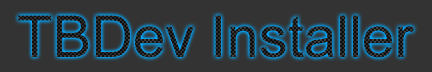
<style>
.page{position:relative;width:432px;height:72px;background:#333333}
.page>*{position:absolute;margin:0}
.t1{font:58px "ArialMT"}
</style>
<div class="page">
<p class="t1" style="left:18px;top:15px;width:397px;height:43px">TBDev Installer</p>
</div>
